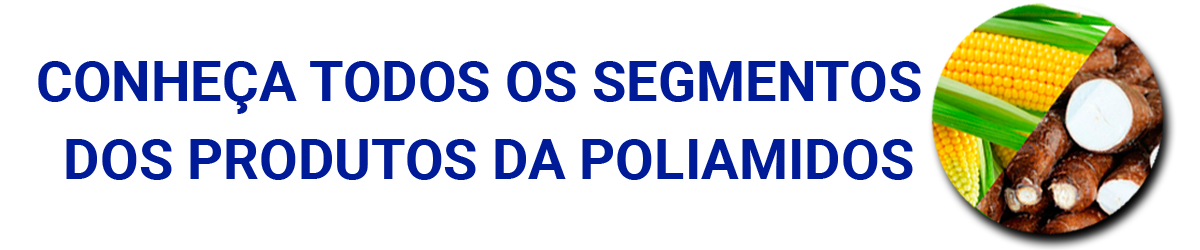
<style>
.page{position:relative;width:1200px;height:250px;background:#ffffff}
.page>*{position:absolute;margin:0}
.t1{font:56px "Roboto-Bold";color:#001b97}
</style>
<div class="page">
<p class="t1" style="left:38px;top:61px;width:883px;height:53px">CONHEÇA TODOS OS SEGMENTOS</p>
<p class="t1" style="left:66px;top:139px;width:847px;height:41px">DOS PRODUTOS DA POLIAMIDOS</p>
</div>
